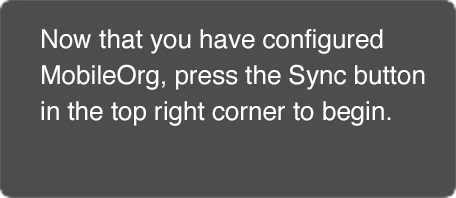
<style>
.page{position:relative;width:456px;height:198px;background:#4d4d4d}
.page>*{position:absolute;margin:0}
.t1{font:26px/36px "Helvetica";color:#ffffff}
</style>
<div class="page">
<p class="t1" style="left:41px;top:29px;width:384px;height:97px">Now that you have configured<br>MobileOrg, press the Sync button<br>in the top right corner to begin.</p>
</div>
